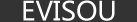
<style>
.page{position:relative;width:137px;height:22px;background:#333333}
.page>*{position:absolute;margin:0}
.t1{font:25.9px "MicrosoftYaHei";color:#ffffff}
</style>
<div class="page">
<p class="t1" style="left:23px;top:0px;width:92px;height:21px">EVISOU</p>
</div>
